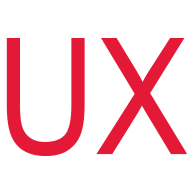
<style>
.page{position:relative;width:192px;height:192px;background:#ffffff}
.page>*{position:absolute;margin:0}
.t1{font:162.5px "ArialMT";color:#e31937;scale:0.85 1}
</style>
<div class="page">
<p class="t1" style="left:6px;top:38px;width:182px;height:118px">UX</p>
</div>
